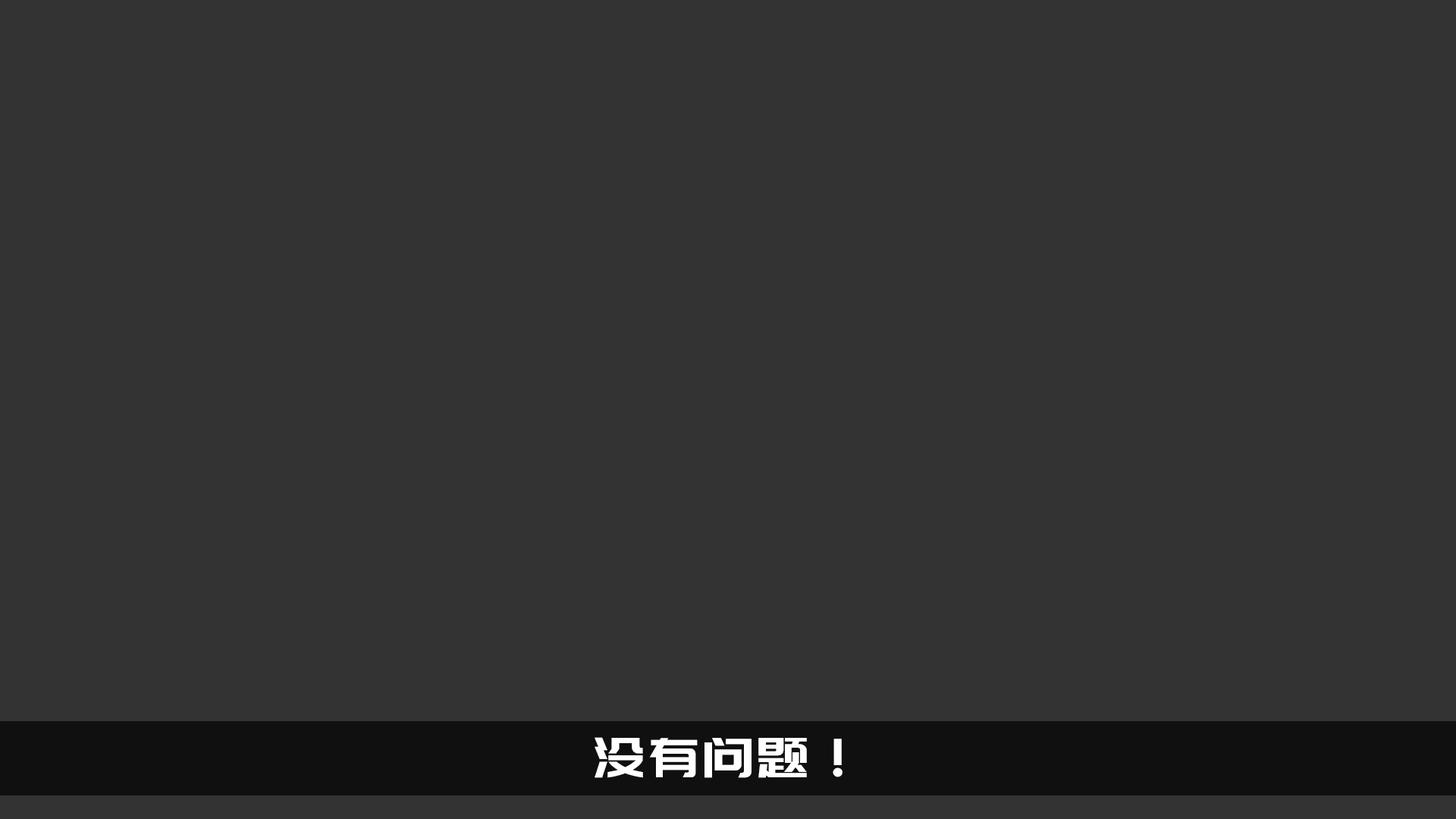
<style>
.page{position:relative;width:1456px;height:819px;background:#333333}
.page>*{position:absolute;margin:0}
.t1{font:54.6px "PangMenZhengDao-3";color:#ffffff}
</style>
<div class="page">
<p class="t1" style="left:595px;top:737px;width:247px;height:41px">没有问题！</p>
</div>
